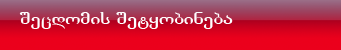
<style>
.page{position:relative;width:341px;height:50px}
.page>*{position:absolute;margin:0}
.t1{font:18px "GeoTimes";color:#fefeff;scale:1.2 1}
</style>
<div class="page">
<p class="t1" style="left:19px;top:12px;width:214px;height:17px">ÛÄÝÃÏÌÉÓ ÛÄÔÚÏÁÉÍÄÁÀ</p>
</div>
